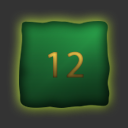
<style>
.page{position:relative;width:128px;height:128px;background:#333333}
.page>*{position:absolute;margin:0}
.t1{font:38.3px "MyriadPro-Regular";font-weight:bold}
</style>
<div class="page">
<p class="t1" style="left:48px;top:51px;width:36px;height:27px">12</p>
</div>
